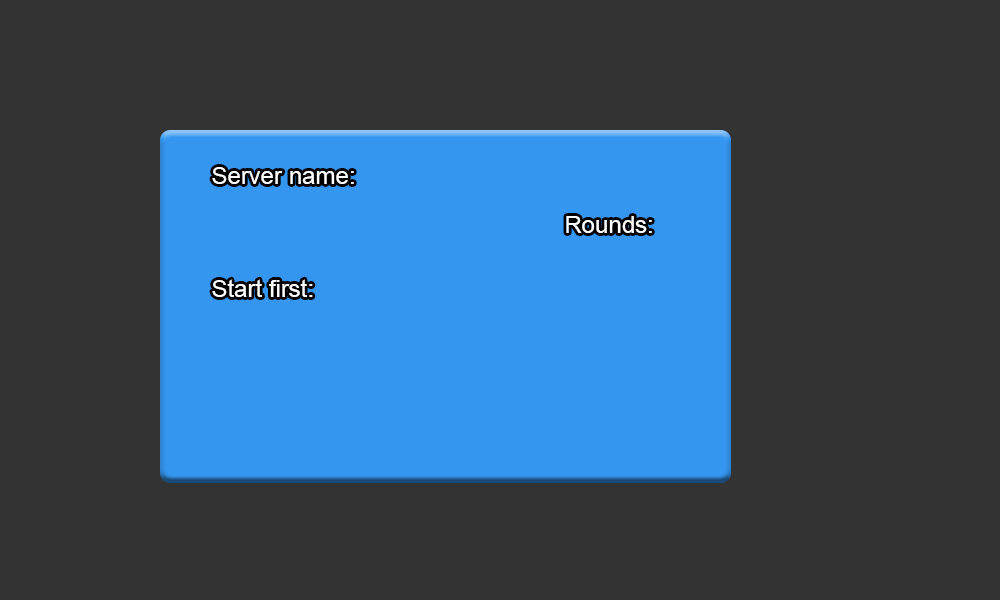
<style>
.page{position:relative;width:1000px;height:600px;background:#333333}
.page>*{position:absolute;margin:0}
.t1{font:24px "ArialMT";color:#ffffff}
</style>
<div class="page">
<p class="t1" style="left:212px;top:167px;width:142px;height:17px">Server name:</p>
<p class="t1" style="left:566px;top:216px;width:86px;height:17px">Rounds:</p>
<p class="t1" style="left:212px;top:279px;width:101px;height:18px">Start first:</p>
</div>
